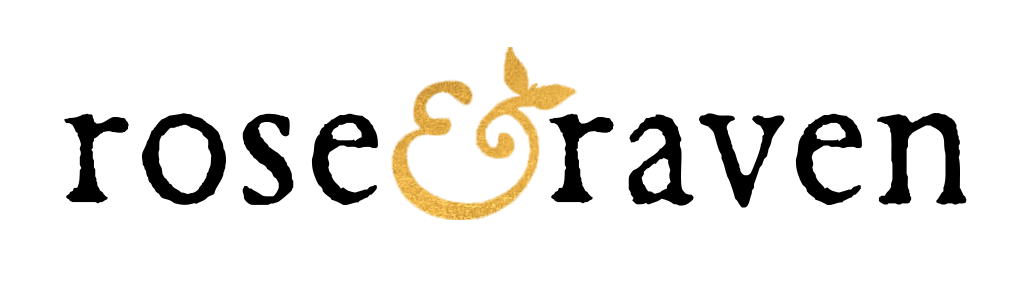
<style>
.page{position:relative;width:1036px;height:296px;background:#ffffff}
.page>*{position:absolute;margin:0}
.t1{font:187.5px "OronteusFinaeusW01-Regular";letter-spacing:0.01em;color:#000000}
</style>
<div class="page">
<p class="t1" style="left:64px;top:113px;width:314px;height:92px">rose</p>
<p class="t1" style="left:549px;top:113px;width:418px;height:95px">raven</p>
</div>
